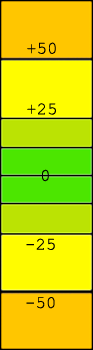
<style>
.page{position:relative;width:93px;height:350px;background:#fffc00}
.page>*{position:absolute;margin:0}
.t1{font:17.5px "CourierNewPSMT";color:#000000}
</style>
<div class="page">
<p class="t1" style="left:27px;top:42px;width:29px;height:12px">+50</p>
<p class="t1" style="left:27px;top:103px;width:29px;height:12px">+25</p>
<p class="t1" style="left:42px;top:169px;width:7px;height:13px">0</p>
<p class="t1" style="left:26px;top:238px;width:29px;height:12px">-25</p>
<p class="t1" style="left:26px;top:297px;width:29px;height:12px">-50</p>
</div>
